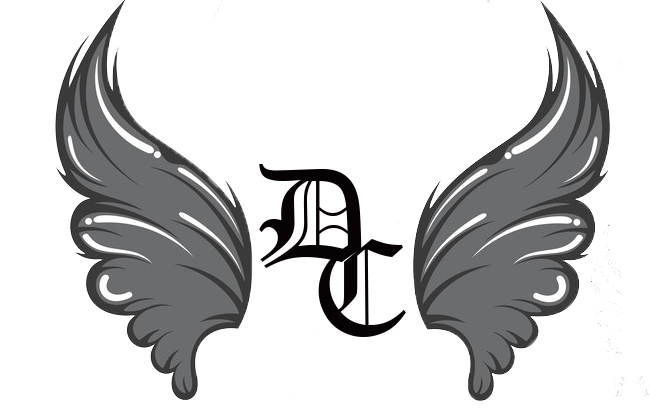
<style>
.page{position:relative;width:650px;height:418px;background:#ffffff}
.page>*{position:absolute;margin:0}
.t1{font:133.3px "OldEnglishTextMT";color:#070204}
</style>
<div class="page">
<p class="t1" style="left:259px;top:164px;width:103px;height:104px">D</p>
<p class="t1" style="left:318px;top:239px;width:88px;height:98px">C</p>
</div>
